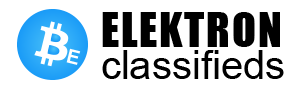
<style>
.page{position:relative;width:300px;height:90px;background:#ffffff}
.page>*{position:absolute;margin:0}
.t1{font:40px/32px "ArialMT";color:#000000}
.t2{font:44px/32px "Impact";letter-spacing:0.04em;color:#000000}
</style>
<div class="page">
<p class="t1" style="left:102px;top:12px;width:182px;height:67px"><span class="t2">ELEKTRON<br></span>classifieds</p>
</div>
